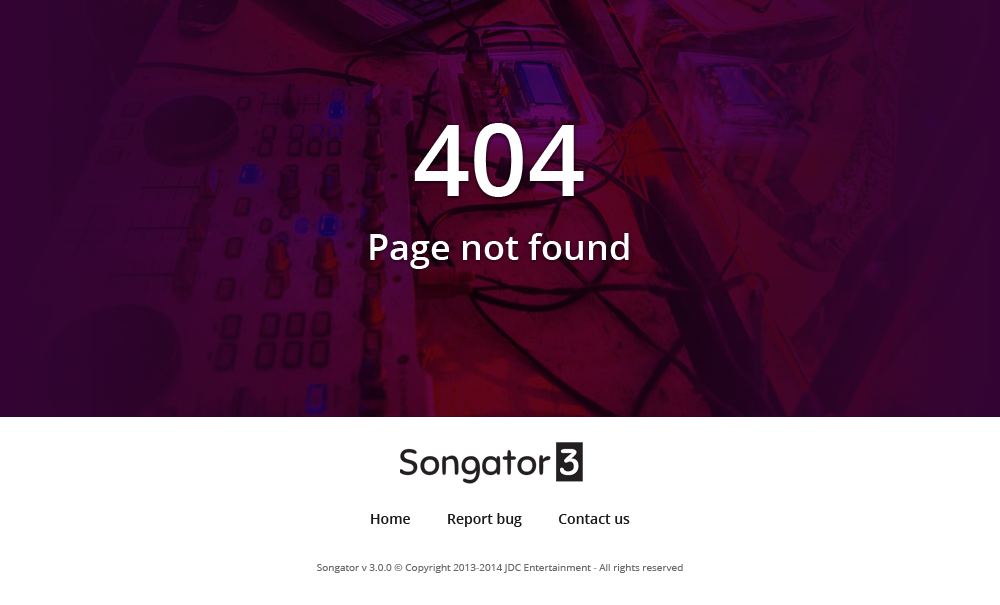
<style>
.page{position:relative;width:1000px;height:605px;background:#ffffff}
.page>*{position:absolute;margin:0}
.t1{font:100px "OpenSans-Semibold";color:#ffffff}
.t2{font:36px "OpenSans-Semibold";color:#ffffff}
.t3{font:14px "OpenSans-Semibold";color:#1a1a1a}
.t4{font:10px "OpenSans";color:#6c6969}
</style>
<div class="page">
<p class="t1" style="left:414px;top:123px;width:170px;height:74px">404</p>
<p class="t2" style="left:370px;top:233px;width:259px;height:36px">Page not found</p>
<p class="t3" style="left:371px;top:513px;width:259px;height:14px">Home          Report bug          Contact us</p>
<p class="t4" style="left:317px;top:564px;width:366px;height:9px">Songator v 3.0.0 © Copyright 2013-2014 JDC Entertainment - All rights reserved</p>
</div>
